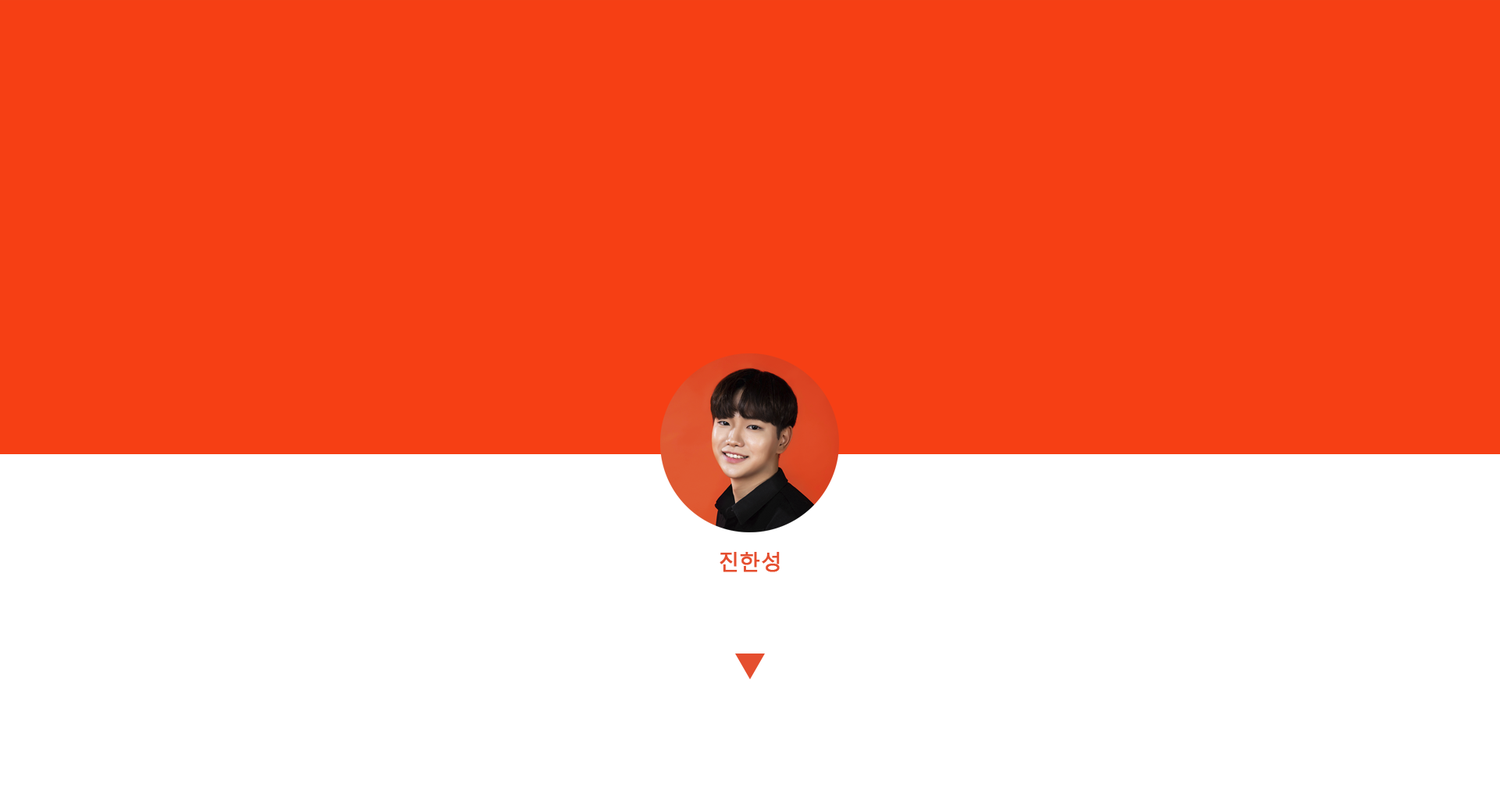
<style>
.page{position:relative;width:1500px;height:795px;background:#f63f14}
.page>*{position:absolute;margin:0}
.t1{font:20.8px "MalgunGothic";color:#e54e2f;font-weight:bold}
</style>
<div class="page">
<p class="t1" style="left:720px;top:552px;width:60px;height:20px">진한성</p>
</div>
